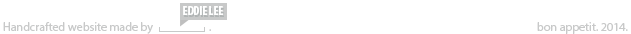
<style>
.page{position:relative;width:631px;height:34px;background:#ffffff}
.page>*{position:absolute;margin:0}
.t1{font:12px "MyriadPro-BoldCond";color:#ffffff}
.t2{font:12px "MyriadPro-Regular";color:#c8c9c9}
</style>
<div class="page">
<p class="t1" style="left:183px;top:6px;width:40px;height:9px">EDDIE LEE</p>
<p class="t2" style="left:3px;top:22px;width:625px;height:12px">Handcrafted website made by                      .                                                                                                                                bon appetit. 2014.</p>
</div>
